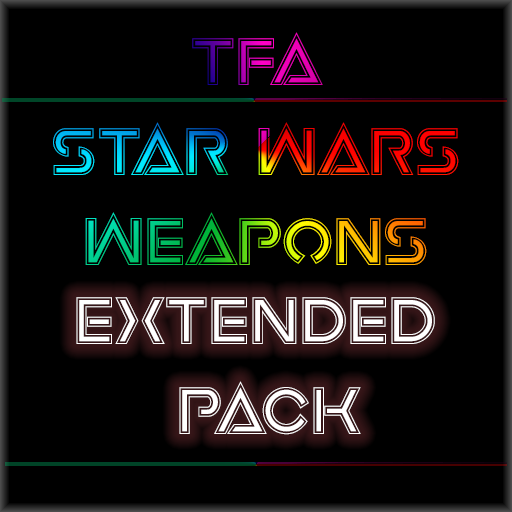
<style>
.page{position:relative;width:512px;height:512px;background:#000000}
.page>*{position:absolute;margin:0}
.t1{font:75px "EarthOrbiterAcademy"}
.t2{font:75px "EarthOrbiterAcademy";color:#ffffff}
</style>
<div class="page">
<p class="t1" style="left:53px;top:32px;width:406px;height:233px;text-align:center">Tfa<br>Star Wars<br>Weapons</p>
<p class="t2" style="left:76px;top:297px;width:359px;height:138px;text-align:center">Extended <br>Pack</p>
</div>
